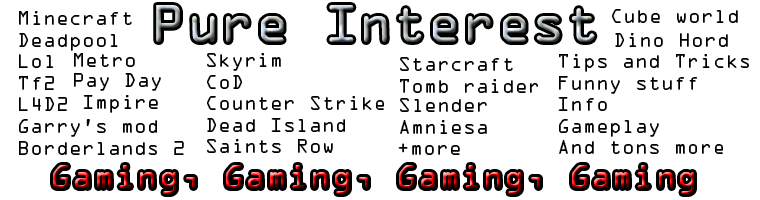
<style>
.page{position:relative;width:760px;height:200px;background:#ffffff}
.page>*{position:absolute;margin:0}
.t1{font:18px "OCRAStd";color:#000000}
.t2{font:30px "OCRAStd"}
</style>
<div class="page">
<p class="t1" style="left:19px;top:11px;width:165px;height:144px">Minecraft<br>Deadpool<br>Lol<br>Tf2<br>L4D2<br>Garry’s mod<br>Borderlands 2</p>
<p class="t1" style="left:612px;top:9px;width:126px;height:14px">Cube world</p>
<p class="t1" style="left:615px;top:33px;width:113px;height:14px">Dino Hord</p>
<p class="t1" style="left:74px;top:53px;width:61px;height:14px">Metro</p>
<p class="t1" style="left:207px;top:53px;width:177px;height:100px">Skyrim<br>CoD<br>Counter Strike<br>Dead Island<br>Saints Row</p>
<p class="t1" style="left:558px;top:54px;width:191px;height:100px">Tips and Tricks<br>Funny stuff<br>Info<br>Gameplay<br>And tons more</p>
<p class="t1" style="left:400px;top:57px;width:138px;height:36px">Starcraft<br>Tomb raider</p>
<p class="t1" style="left:74px;top:73px;width:87px;height:18px">Pay Day</p>
<p class="t1" style="left:83px;top:95px;width:75px;height:18px">Impire</p>
<p class="t1" style="left:400px;top:98px;width:87px;height:36px">Slender<br>Amniesa</p>
<p class="t1" style="left:398px;top:143px;width:62px;height:12px">+more</p>
<p class="t2" style="left:53px;top:165px;width:641px;height:29px">Gaming, Gaming, Gaming, Gaming</p>
</div>
